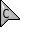
<style>
.page{position:relative;width:32px;height:32px;background:#ffffff}
.page>*{position:absolute;margin:0}
.t1{font:12.6px "Verdana";color:#000000;scale:0.71 1}
</style>
<div class="page">
<p class="t1" style="left:3px;top:9px;width:6px;height:9px">C</p>
</div>
